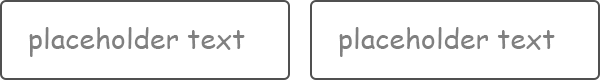
<style>
.page{position:relative;width:600px;height:80px;background:#ffffff}
.page>*{position:absolute;margin:0}
.t1{font:28px "ComicSansMS";color:#808080}
</style>
<div class="page">
<p class="t1" style="left:29px;top:27px;width:216px;height:30px">placeholder text</p>
<p class="t1" style="left:339px;top:27px;width:216px;height:30px">placeholder text</p>
</div>
